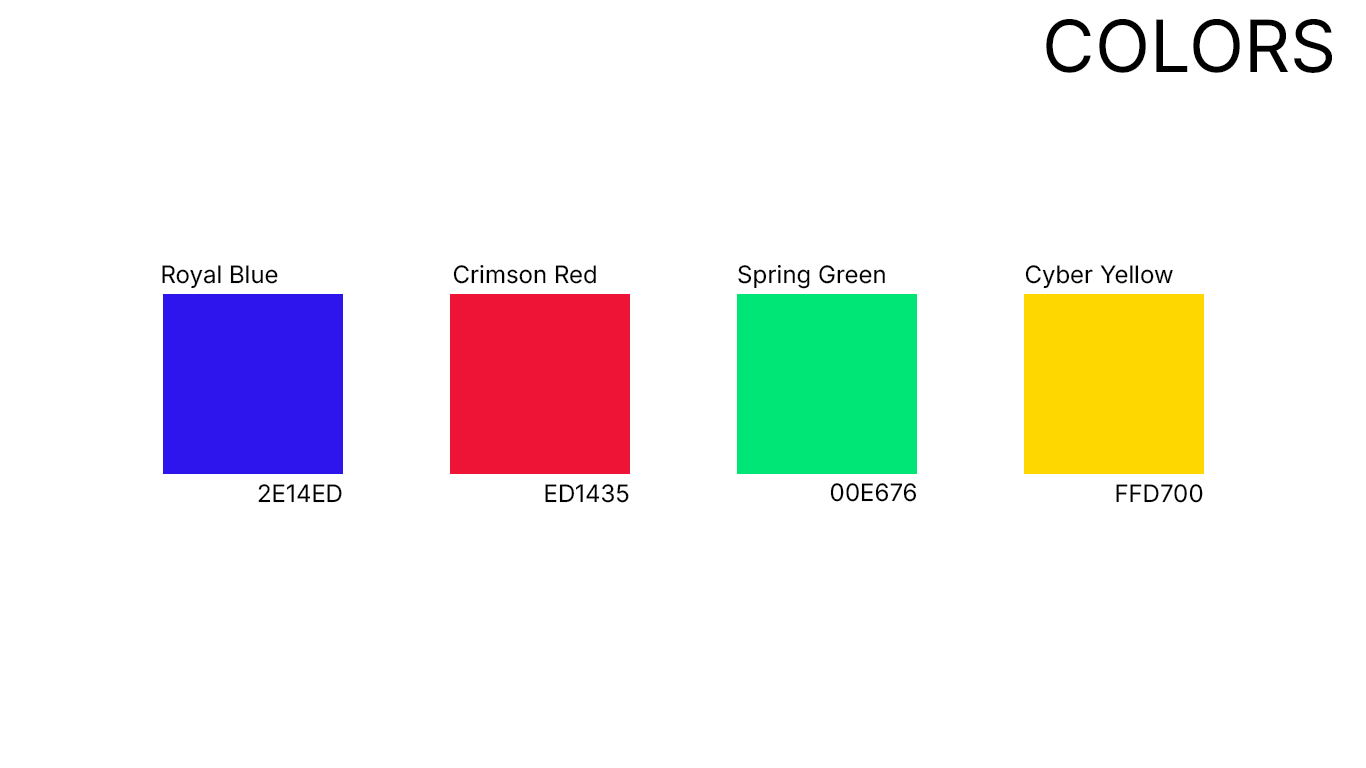
<style>
.page{position:relative;width:1366px;height:768px;background:#ffffff}
.page>*{position:absolute;margin:0}
.t1{font:72px "Inter-Regular";color:#000000}
.t2{font:24px "Inter-Regular";color:#000000}
</style>
<div class="page">
<p class="t1" style="left:1046px;top:19px;width:286px;height:54px">COLORS</p>
<p class="t2" style="left:162px;top:265px;width:116px;height:24px">Royal Blue</p>
<p class="t2" style="left:453px;top:265px;width:143px;height:19px">Crimson Red</p>
<p class="t2" style="left:738px;top:264px;width:147px;height:25px">Spring Green</p>
<p class="t2" style="left:1025px;top:265px;width:148px;height:24px">Cyber Yellow</p>
<p class="t2" style="left:258px;top:484px;width:84px;height:19px">2E14ED</p>
<p class="t2" style="left:545px;top:484px;width:84px;height:19px">ED1435</p>
<p class="t2" style="left:830px;top:483px;width:87px;height:19px">00E676</p>
<p class="t2" style="left:1116px;top:484px;width:87px;height:19px">FFD700</p>
</div>
